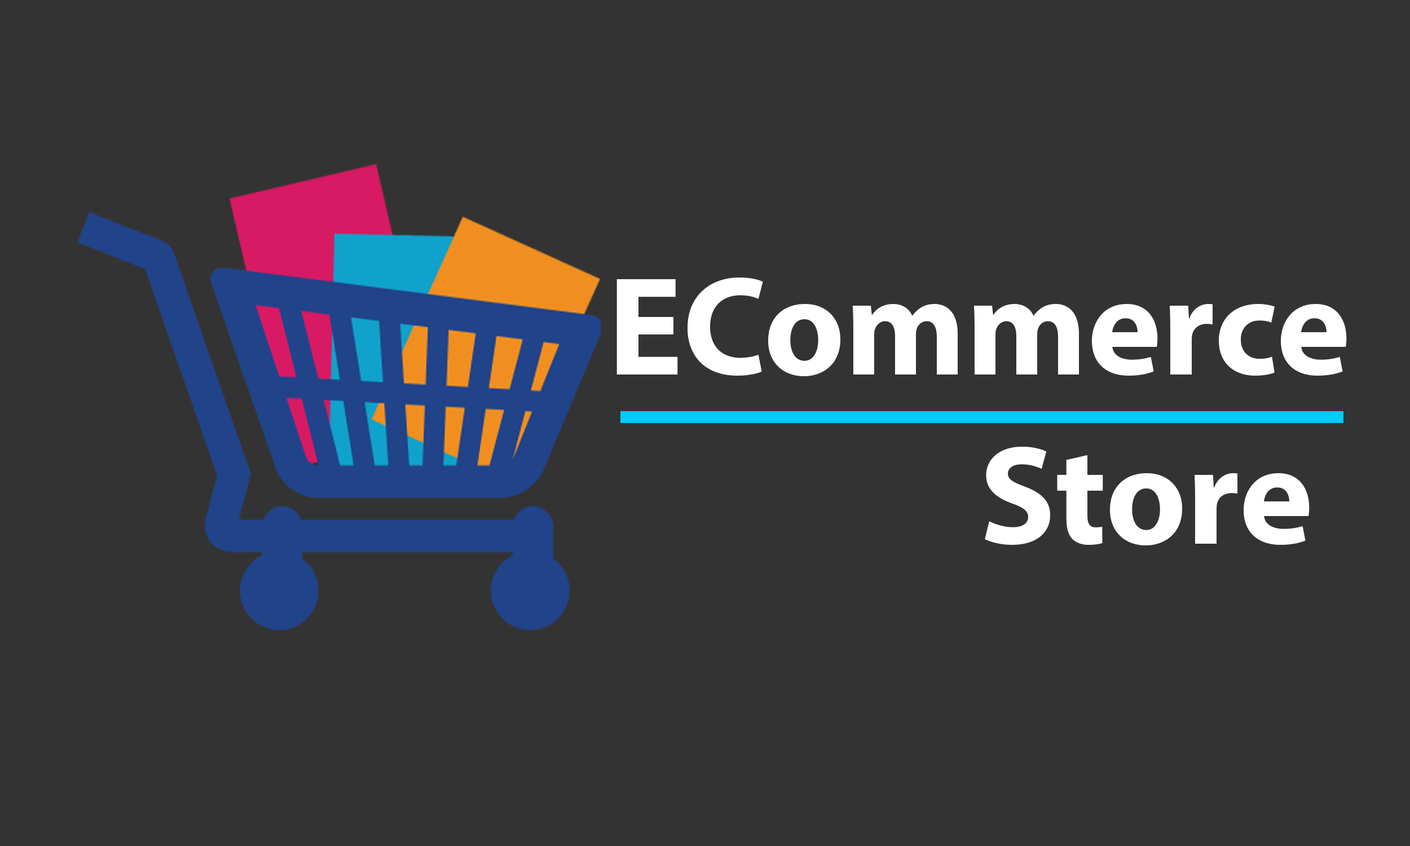
<style>
.page{position:relative;width:1410px;height:846px;background:#333333}
.page>*{position:absolute;margin:0}
.t1{font:141px "MyriadPro-Bold";color:#ffffff}
</style>
<div class="page">
<p class="t1" style="left:616px;top:277px;width:731px;height:268px;text-align:center">ECommerce<br>Store</p>
</div>
